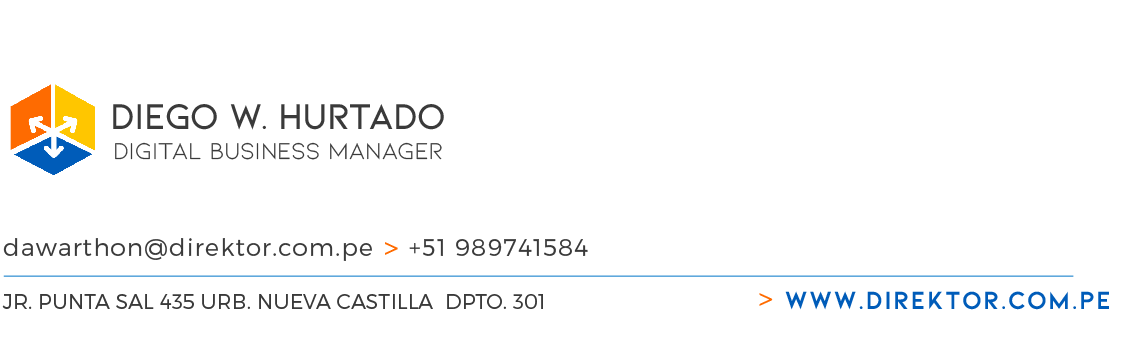
<style>
.page{position:relative;width:1126px;height:349px;background:#ffffff}
.page>*{position:absolute;margin:0}
.t1{font:37.9px "Kiona-SemiBold";letter-spacing:-0.025em;color:#3a3a3a}
.t2{font:24.2px "Kiona-Regular";letter-spacing:-0.01em;color:#3a3a3a}
.t3{font:24.3px "Montserrat-Light";letter-spacing:0.05em;color:#3a3a3a}
.t4{font:24.3px "Tahoma";letter-spacing:0.05em;color:#ff6b00}
.t5{font:20.6px "Montserrat-Light";letter-spacing:0.01em;color:#3a3a3a}
.t6{font:26.1px "Kiona-Bold";letter-spacing:0.049em;color:#005cb9}
</style>
<div class="page">
<p class="t1" style="left:113px;top:104px;width:331px;height:26px">DIEGO W. HURTADO</p>
<p class="t2" style="left:115px;top:142px;width:327px;height:18px">Digital Business Manager</p>
<p class="t3" style="left:3px;top:238px;width:585px;height:23px">dawarthon@direktor.com.pe <span class="t4">&gt;</span> +51 989741584</p>
<p class="t5" style="left:2px;top:294px;width:541px;height:15px">JR. PUNTA SAL 435 URB. NUEVA CASTILLA  DPTO. 301</p>
<p class="t6" style="left:759px;top:291px;width:350px;height:19px"><span class="t4">&gt; </span>www.direktor.com.pe</p>
</div>
